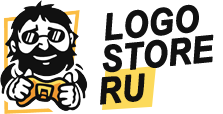
<style>
.page{position:relative;width:223px;height:114px;background:#ffffff}
.page>*{position:absolute;margin:0}
.t1{font:36.4px "Arial-BoldItalicMT";color:#111111;text-transform:uppercase;font-weight:bold;scale:0.87 1}
</style>
<div class="page">
<p class="t1" style="left:105px;top:4px;width:94px;height:37px;rotate:-6deg">Logo</p>
<p class="t1" style="left:102px;top:34px;width:112px;height:39px;rotate:-6deg">Store</p>
<p class="t1" style="left:100px;top:73px;width:45px;height:32px;rotate:-6deg">RU</p>
</div>
